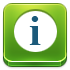
<style>
.page{position:relative;width:70px;height:70px;background:#ffffff}
.page>*{position:absolute;margin:0}
.t1{font:42px "TimesNewRomanPS-BoldMT";color:#1c5a7a}
</style>
<div class="page">
<p class="t1" style="left:29px;top:16px;width:12px;height:29px">i</p>
</div>
